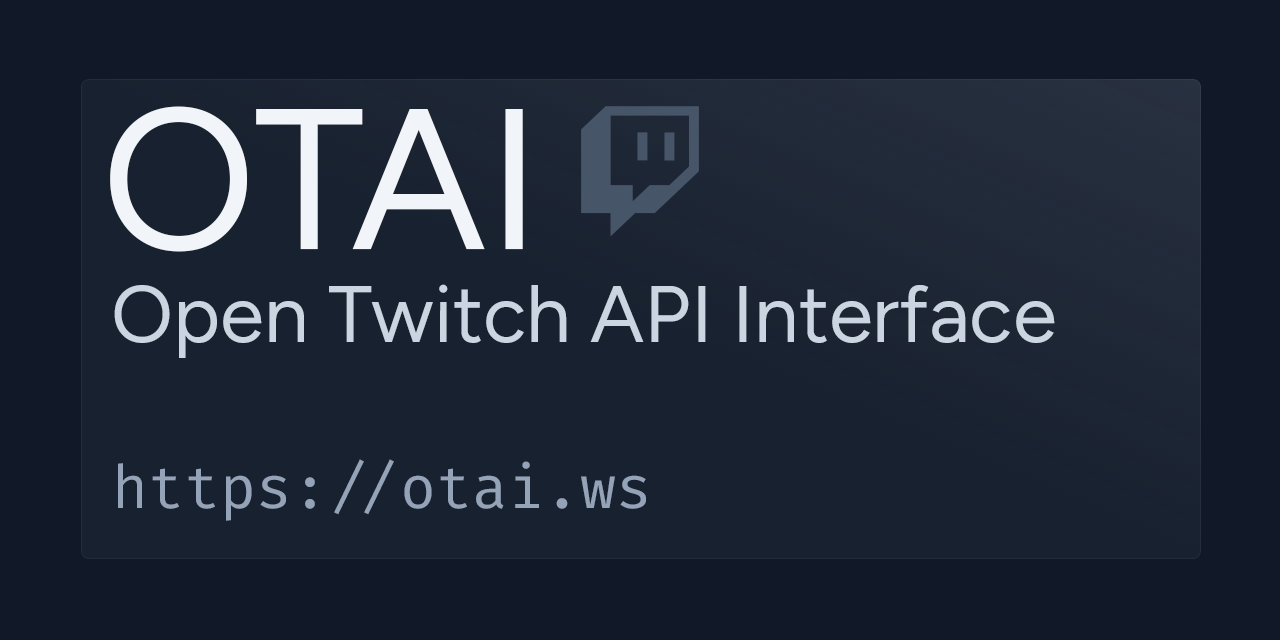
<style>
.page{position:relative;width:1280px;height:640px;background:#111827}
.page>*{position:absolute;margin:0}
.t1{font:200px "FigtreeLight-Regular";color:#f1f5f9}
.t2{font:80px "FigtreeLight-Regular";color:#cbd5e1}
.t3{font:60px "FiraCode-Regular";color:#94a3b8}
</style>
<div class="page">
<p class="t1" style="left:110px;top:106px;width:413px;height:146px">OTAI</p>
<p class="t2" style="left:114px;top:284px;width:941px;height:74px">Open Twitch API Interface</p>
<p class="t3" style="left:118px;top:459px;width:528px;height:62px">https://otai.ws</p>
</div>
